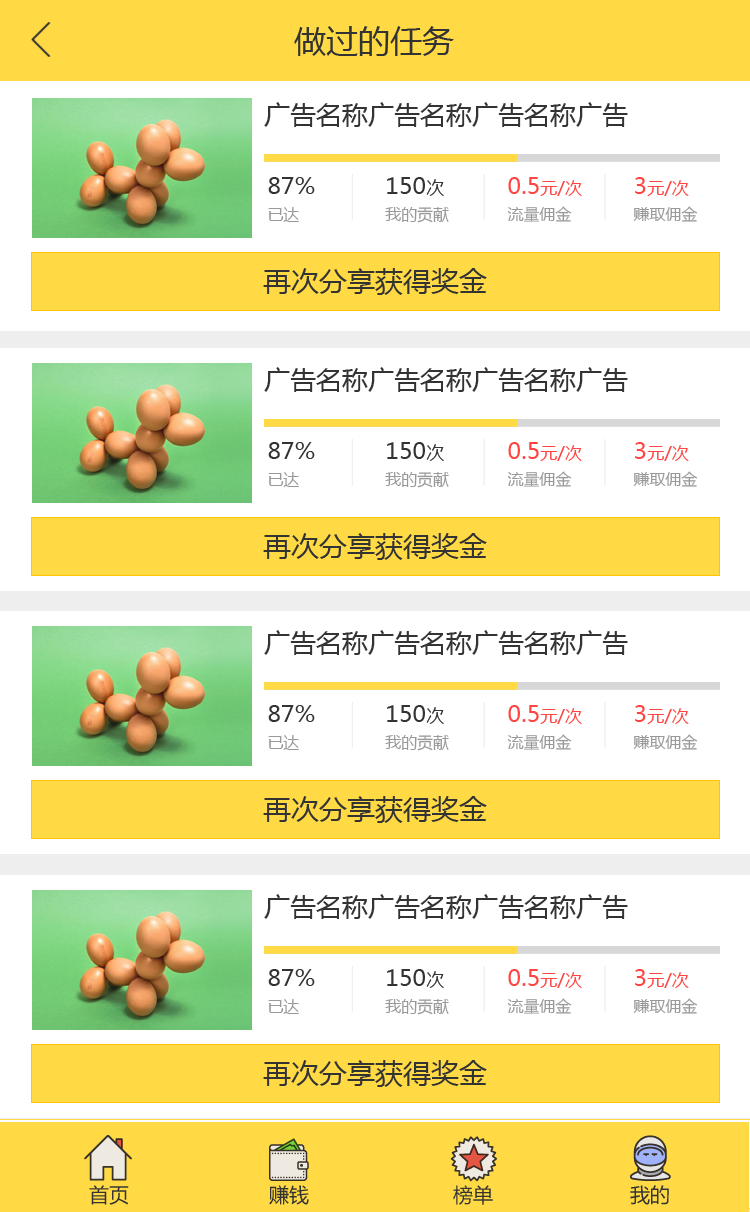
<style>
.page{position:relative;width:750px;height:1212px;background:#ffffff}
.page>*{position:absolute;margin:0}
.t1{font:32px "MicrosoftYaHei";color:#333333}
.t2{font:26px "MicrosoftYaHei";color:#333333}
.t3{font:23.2px/32.8px "MicrosoftYaHei";color:#333333}
.t4{font:15.9px/32.8px "MicrosoftYaHei";color:#999999}
.t5{font:18px/32.8px "MicrosoftYaHei";color:#333333}
.t6{font:23.2px/32.8px "MicrosoftYaHei";color:#fe4542}
.t7{font:17.3px/32.8px "MicrosoftYaHei";color:#fe4542}
.t8{font:28px "MicrosoftYaHei";color:#333333}
.t9{font:20px "MicrosoftYaHei";color:#333333}
</style>
<div class="page">
<p class="t1" style="left:294px;top:26px;width:160px;height:30px">做过的任务</p>
<p class="t2" style="left:264px;top:102px;width:364px;height:25px">广告名称广告名称广告名称广告</p>
<p class="t3" style="left:268px;top:177px;width:47px;height:45px">87%<br><span class="t4">已达</span></p>
<p class="t4" style="left:385px;top:177px;width:64px;height:46px"><span class="t3">150</span><span class="t5">次<br></span>我的贡献</p>
<p class="t4" style="left:507px;top:177px;width:75px;height:45px"><span class="t6">0.5</span><span class="t7">元/次<br></span>流量佣金</p>
<p class="t4" style="left:633px;top:177px;width:65px;height:45px"><span class="t6">3</span><span class="t7">元/次<br></span>赚取佣金</p>
<p class="t8" style="left:263px;top:268px;width:224px;height:27px">再次分享获得奖金</p>
<p class="t9" style="left:89px;top:1185px;width:40px;height:20px">首页</p>
<p class="t9" style="left:269px;top:1185px;width:40px;height:20px">赚钱</p>
<p class="t9" style="left:453px;top:1185px;width:40px;height:20px">榜单</p>
<p class="t9" style="left:630px;top:1185px;width:39px;height:20px">我的</p>
</div>
